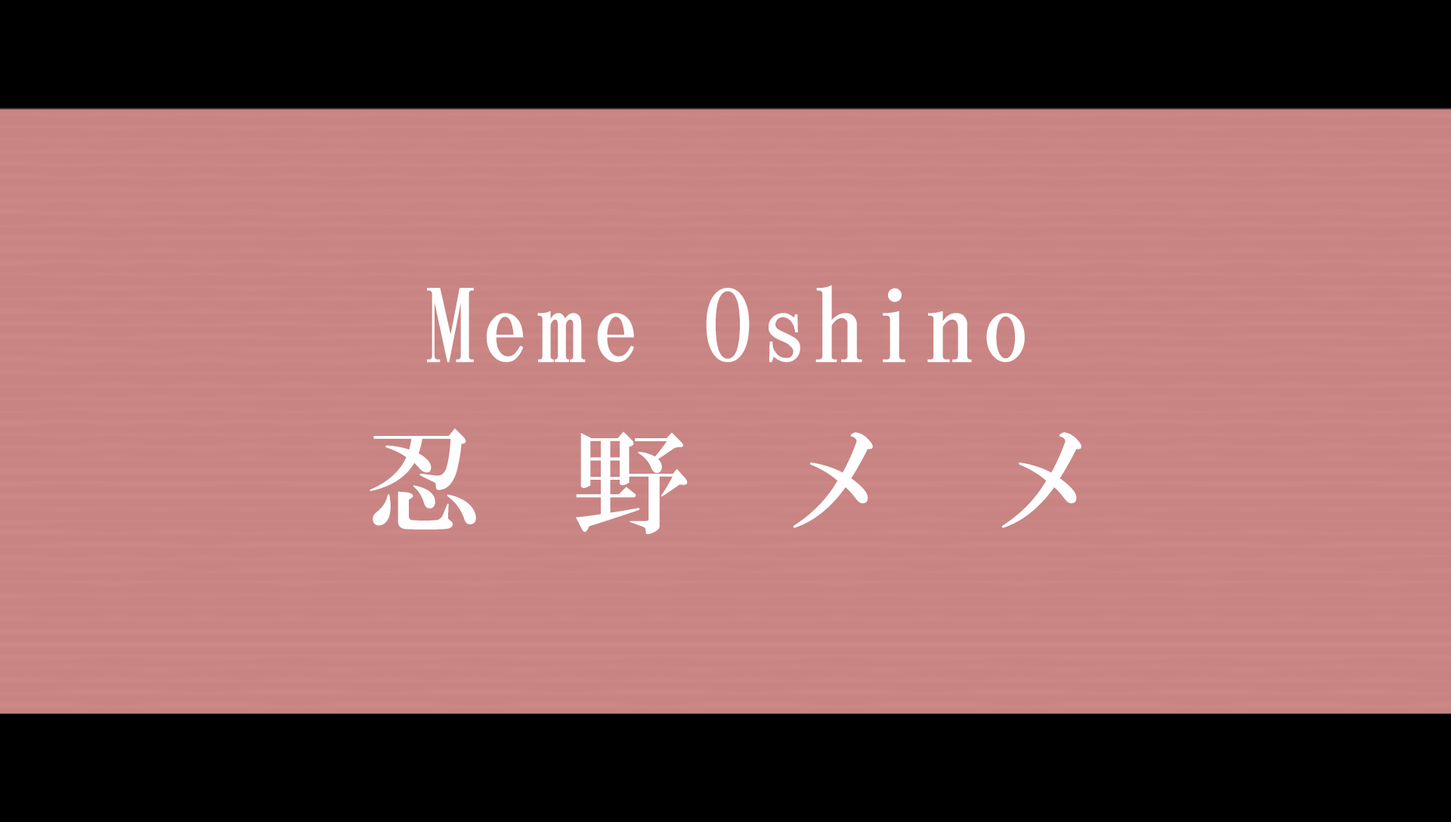
<style>
.page{position:relative;width:1451px;height:822px;background:#c78483}
.page>*{position:absolute;margin:0}
.t1{font:100.7px "HGMinchoB";letter-spacing:0.05em;color:#fffeff}
.t2{font:117.9px "HGMinchoB";letter-spacing:0.77em;color:#fffeff}
</style>
<div class="page">
<p class="t1" style="left:427px;top:285px;width:597px;height:78px">Meme Oshino</p>
<p class="t2" style="left:369px;top:428px;width:712px;height:106px">忍野メメ</p>
</div>
